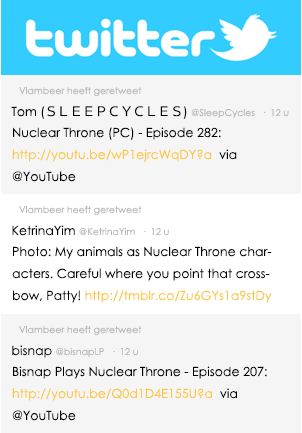
<style>
.page{position:relative;width:302px;height:433px;background:#f5f5f5}
.page>*{position:absolute;margin:0}
.t1{font:9.4px "CenturyGothic";color:#b7b7b7}
.t2{font:12.6px "CenturyGothic";color:#b7b7b7}
.t3{font:12.6px "CenturyGothic";color:#010101}
.t4{font:12.6px "KozGoPr6N-Regular";color:#010101}
.t5{font:12.6px/22px "CenturyGothic";color:#000000}
.t6{font:12.6px/22px "CenturyGothic";color:#fac846}
</style>
<div class="page">
<p class="t1" style="left:19px;top:86px;width:123px;height:10px">Vlambeer heeft geretweet</p>
<p class="t1" style="left:11px;top:106px;width:278px;height:13px"><span class="t2"> </span><span class="t3">Tom (</span><span class="t4">ＳＬＥＥＰＣＹＣＬＥＳ</span><span class="t3">) </span>@SleepCycles  ·  12 u</p>
<p class="t5" style="left:12px;top:127px;width:225px;height:55px">Nuclear Throne (PC) - Episode 282: <br><span class="t6">http://youtu.be/wP1ejrcWqDY?a</span>  via <br>@YouTube</p>
<p class="t1" style="left:19px;top:205px;width:123px;height:10px">Vlambeer heeft geretweet</p>
<p class="t1" style="left:12px;top:225px;width:157px;height:11px"><span class="t2"> </span><span class="t3">KetrinaYim </span>@KetrinaYim  ·  12 u</p>
<p class="t5" style="left:12px;top:246px;width:260px;height:57px">Photo: My animals as Nuclear Throne char-<br>acters. Careful where you point that cross-<br>bow, Patty! <span class="t6">http://tmblr.co/Zu6GYs1a9stDy</span></p>
<p class="t1" style="left:19px;top:325px;width:123px;height:10px">Vlambeer heeft geretweet</p>
<p class="t1" style="left:12px;top:345px;width:126px;height:13px"><span class="t2"> </span><span class="t3">bisnap </span>@bisnapLP  ·  12 u</p>
<p class="t5" style="left:12px;top:366px;width:255px;height:55px">Bisnap Plays Nuclear Throne - Episode 207: <br><span class="t6">http://youtu.be/Q0d1D4E155U?a</span>  via <br>@YouTube</p>
</div>
